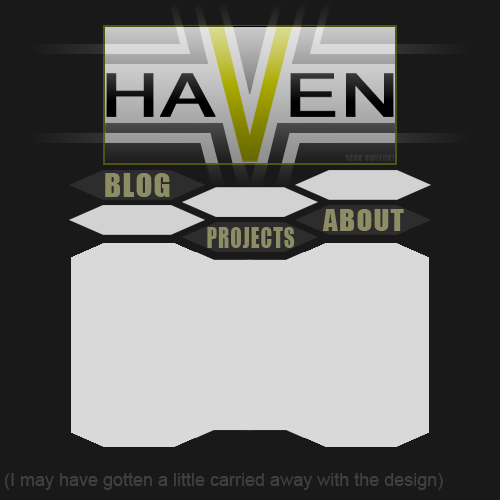
<style>
.page{position:relative;width:500px;height:500px;background:#191919}
.page>*{position:absolute;margin:0}
.t1{font:8px "Impact";letter-spacing:0.05em;color:#333333;text-transform:uppercase}
.t2{font:30px "Impact";letter-spacing:0.05em;color:#8c8c65;text-transform:uppercase}
.t3{font:28px "Impact";letter-spacing:0.05em;color:#8c8c65;text-transform:uppercase}
.t4{font:26px "Impact";letter-spacing:0.05em;color:#8c8c65;text-transform:uppercase;scale:0.8 1}
.t5{font:18px "ArialMT";color:#404040}
</style>
<div class="page">
<p class="t1" style="left:345px;top:154px;width:50px;height:8px">Sean Owiecki</p>
<p class="t2" style="left:105px;top:173px;width:65px;height:24px">Blog</p>
<p class="t3" style="left:323px;top:209px;width:81px;height:22px">About</p>
<p class="t4" style="left:207px;top:227px;width:88px;height:21px">Projects</p>
<p class="t5" style="left:5px;top:473px;width:438px;height:17px">(I may have gotten a little carried away with the design)</p>
</div>
